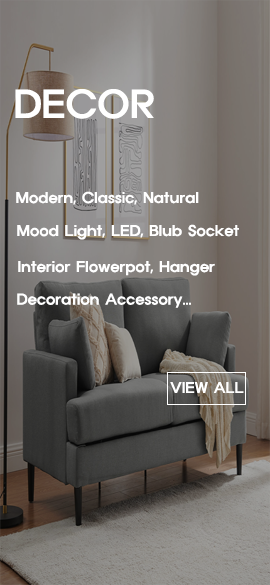
<style>
.page{position:relative;width:270px;height:585px}
.page>*{position:absolute;margin:0}
.t1{font:36px "ExpoM-HM";letter-spacing:0.01em;color:#ffffff}
.t2{font:14px "ExpoM-HM";letter-spacing:0.01em;color:#ffffff}
</style>
<div class="page">
<p class="t1" style="left:15px;top:89px;width:139px;height:30px">DECOR</p>
<p class="t2" style="left:16px;top:191px;width:183px;height:14px">Modern, Classic, Natural</p>
<p class="t2" style="left:17px;top:224px;width:222px;height:16px">Mood Light, LED, Blub Socket</p>
<p class="t2" style="left:18px;top:261px;width:197px;height:15px">Interior Flowerpot, Hanger</p>
<p class="t2" style="left:17px;top:293px;width:174px;height:15px">Decoration Accessory...</p>
</div>
